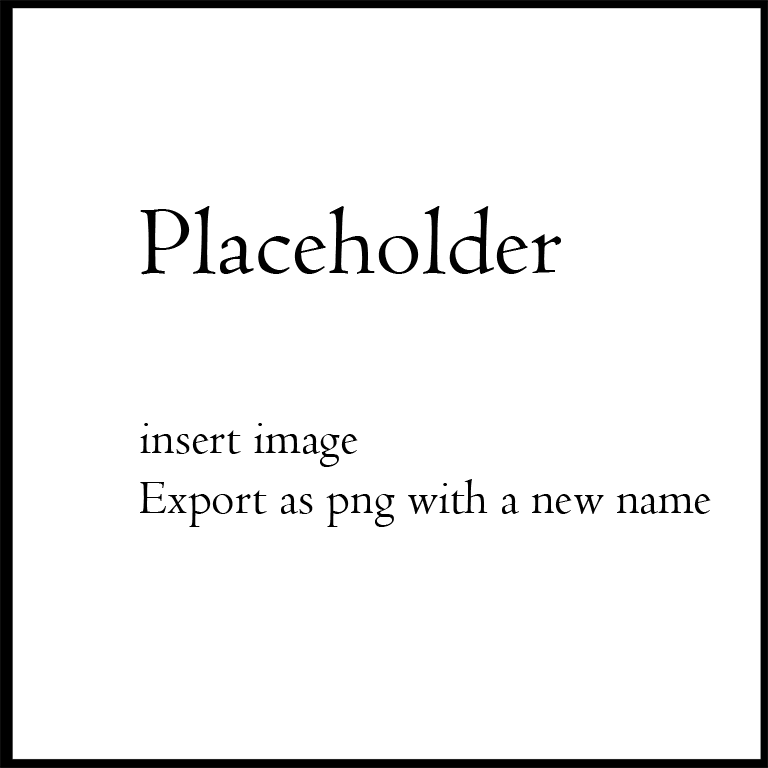
<style>
.page{position:relative;width:768px;height:768px;background:#ffffff}
.page>*{position:absolute;margin:0}
.t1{font:50px "Centaur";color:#000000}
.t2{font:100px "Centaur";color:#000000}
</style>
<div class="page">
<p class="t1" style="left:140px;top:206px;width:571px;height:321px"><span class="t2">Placeholder<br><br></span>insert image <br>Export as png with a new name</p>
</div>
